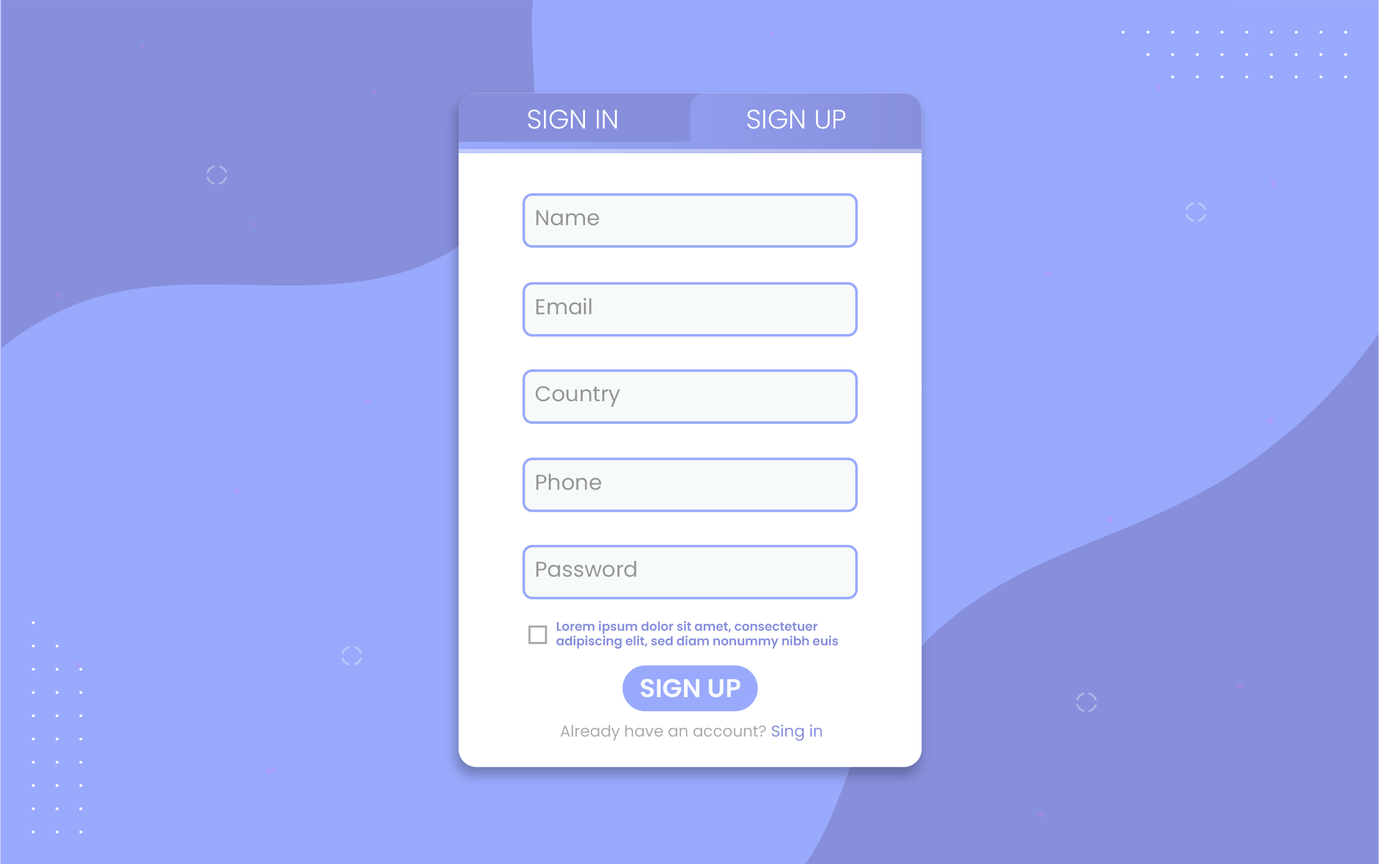
<style>
.page{position:relative;width:1379px;height:864px;background:#99a9fc}
.page>*{position:absolute;margin:0}
.t1{font:26.7px "Poppins-Light";color:#ffffff}
.t2{font:21.4px "Poppins-Regular";color:#969696}
.t3{font:12.4px "Poppins-SemiBold";color:#878fdc}
.t4{font:25.8px "Poppins-SemiBold";color:#f7fafb}
.t5{font:15.8px "Poppins-Regular";color:#adadad}
.t6{font:15.8px "Poppins-Regular";color:#878fdc}
</style>
<div class="page">
<p class="t1" style="left:528px;top:110px;width:89px;height:19px">SIGN IN</p>
<p class="t1" style="left:747px;top:110px;width:99px;height:19px">SIGN UP</p>
<p class="t2" style="left:537px;top:210px;width:62px;height:16px">Name</p>
<p class="t2" style="left:537px;top:298px;width:55px;height:17px">Email</p>
<p class="t2" style="left:535px;top:386px;width:85px;height:21px">Country</p>
<p class="t2" style="left:537px;top:474px;width:64px;height:17px">Phone</p>
<p class="t2" style="left:537px;top:561px;width:99px;height:17px">Password</p>
<p class="t3" style="left:557px;top:621px;width:282px;height:28px">Lorem ipsum dolor sit amet, consectetuer adipiscing elit, sed diam nonummy nibh euis</p>
<p class="t4" style="left:641px;top:679px;width:100px;height:19px">SIGN UP</p>
<p class="t5" style="left:560px;top:725px;width:262px;height:16px">Already have an account?<span class="t6"> Sing in</span></p>
</div>
